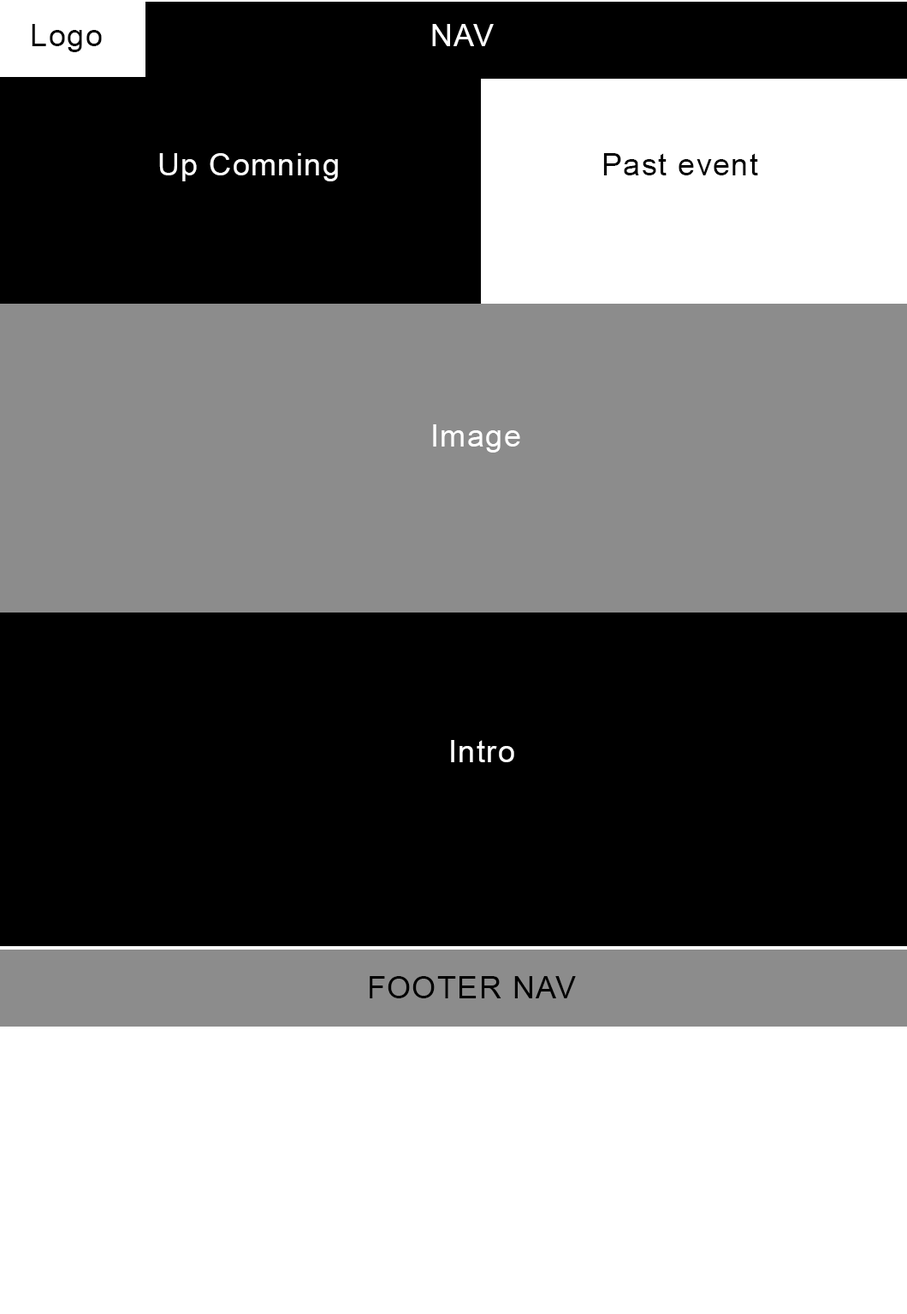
<style>
.page{position:relative;width:907px;height:1314px;background:#000000}
.page>*{position:absolute;margin:0}
.t1{font:30.8px "ArialMT";letter-spacing:0.04em;color:#000000}
.t2{font:30.8px "ArialMT";letter-spacing:0.04em;color:#ffffff}
</style>
<div class="page">
<p class="t1" style="left:32px;top:24px;width:70px;height:28px">Logo</p>
<p class="t2" style="left:432px;top:24px;width:62px;height:22px">NAV</p>
<p class="t2" style="left:159px;top:153px;width:179px;height:28px">Up Comning</p>
<p class="t1" style="left:603px;top:153px;width:155px;height:22px">Past event</p>
<p class="t2" style="left:433px;top:424px;width:87px;height:29px">Image</p>
<p class="t2" style="left:451px;top:740px;width:63px;height:23px">Intro</p>
<p class="t1" style="left:370px;top:976px;width:206px;height:23px">FOOTER NAV</p>
</div>
